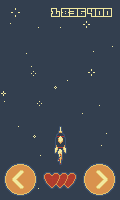
<style>
.page{position:relative;width:120px;height:200px;background:#333f4f}
.page>*{position:absolute;margin:0}
.t1{font:12px "OrigamiMommy";letter-spacing:-0.175em;color:#f2e8a0}
</style>
<div class="page">
<p class="t1" style="left:51px;top:8px;width:61px;height:9px">1 836 400</p>
</div>
